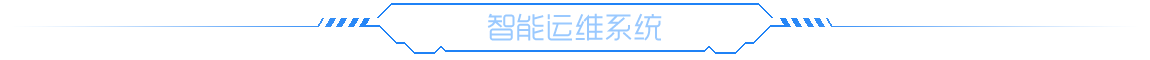
<style>
.page{position:relative;width:1150px;height:60px;background:#ffffff}
.page>*{position:absolute;margin:0}
.t1{font:29.4px "RTWSYueGoTrial-Regular";color:#9ac9ff}
</style>
<div class="page">
<p class="t1" style="left:487px;top:13px;width:175px;height:28px">智能运维系统</p>
</div>
